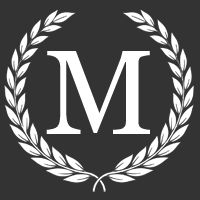
<style>
.page{position:relative;width:200px;height:200px;background:#333333}
.page>*{position:absolute;margin:0}
.t1{font:120px "Georgia";color:#ffffff}
</style>
<div class="page">
<p class="t1" style="left:46px;top:51px;width:104px;height:83px">M</p>
</div>
